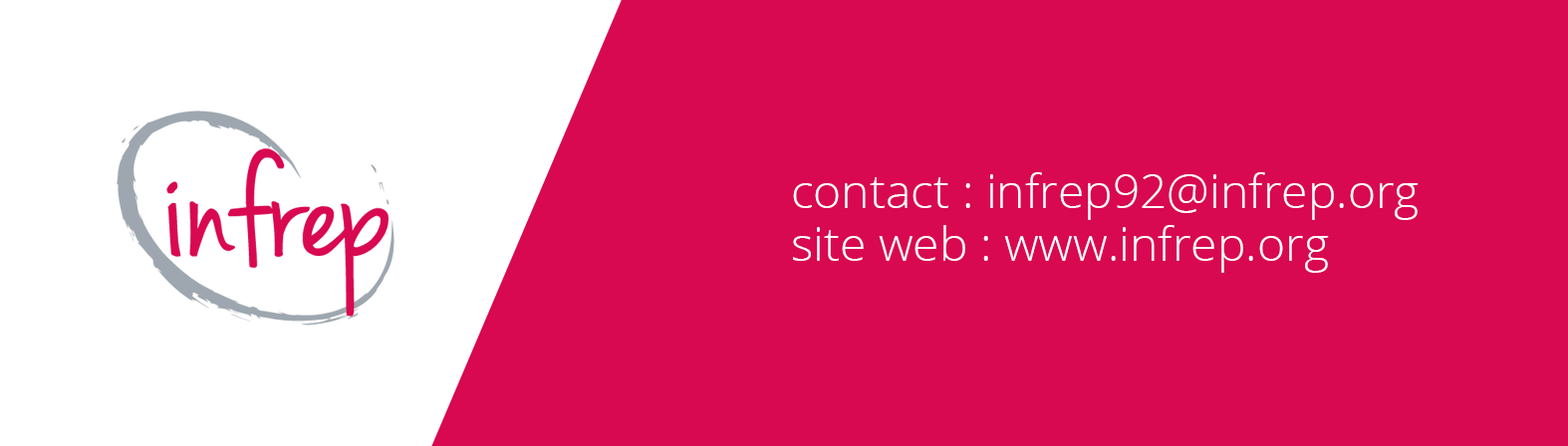
<style>
.page{position:relative;width:1568px;height:446px;background:#d80851}
.page>*{position:absolute;margin:0}
.t1{font:47.8px/52.8px "OpenSans-Light";color:#ffffff}
</style>
<div class="page">
<p class="t1" style="left:793px;top:172px;width:626px;height:101px">contact : infrep92@infrep.org<br>site web : www.infrep.org</p>
</div>
